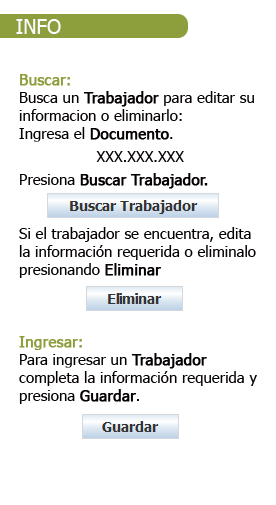
<style>
.page{position:relative;width:276px;height:505px;background:#ffffff}
.page>*{position:absolute;margin:0}
.t1{font:20px "Tahoma";color:#fcfbfb}
.t2{font:15px "Tahoma";color:#040000}
.t3{font:15px "Tahoma";color:#8d9e3d;font-weight:bold}
.t4{font:15px "Tahoma";color:#040000;font-weight:bold}
</style>
<div class="page">
<p class="t1" style="left:16px;top:19px;width:45px;height:15px">INFO</p>
<p class="t2" style="left:19px;top:74px;width:238px;height:330px"><span class="t3">Buscar:<br></span>Busca un <span class="t4">Trabajador</span> para editar su informacion o eliminarlo:<br>Ingresa el <span class="t4">Documento</span>.<br>XXX.XXX.XXX<br>Presiona <span class="t4">Buscar Trabajador.<br></span><br><br>Si el trabajador se encuentra, edita la información requerida o eliminalo presionando <span class="t4">Eliminar<br><br><br><br></span><span class="t3">Ingresar:<br></span>Para ingresar un <span class="t4">Trabajador</span> completa la información requerida y presiona <span class="t4">Guardar</span>.</p>
</div>
